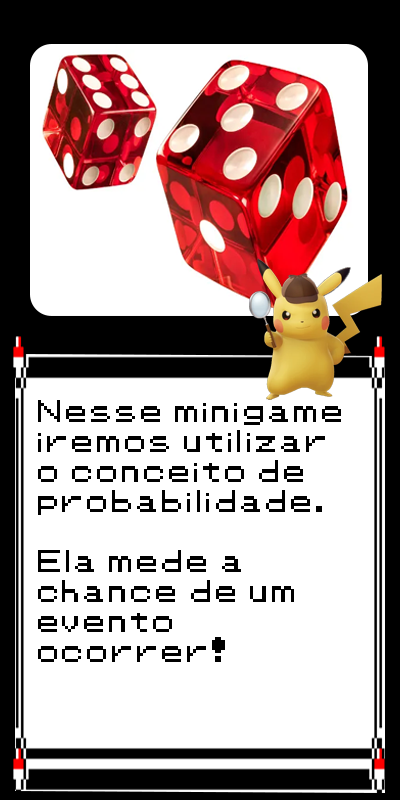
<style>
.page{position:relative;width:400px;height:800px;background:#ffffff}
.page>*{position:absolute;margin:0}
.t1{font:25px "Pokemon-Classic";color:#000000}
</style>
<div class="page">
<p class="t1" style="left:38px;top:400px;width:303px;height:262px">Nesse minigame <br>iremos utilizar <br>o conceito de <br>probabilidade.<br><br>Ela mede a <br>chance de um <br>evento <br>ocorrer!</p>
</div>
